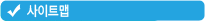
<style>
.page{position:relative;width:205px;height:21px;background:#24a4e0}
.page>*{position:absolute;margin:0}
.t1{font:14px "YDIYGO330";color:#ffffff;scale:0.82 1}
</style>
<div class="page">
<p class="t1" style="left:27px;top:4px;width:42px;height:14px">사이트맵</p>
</div>
